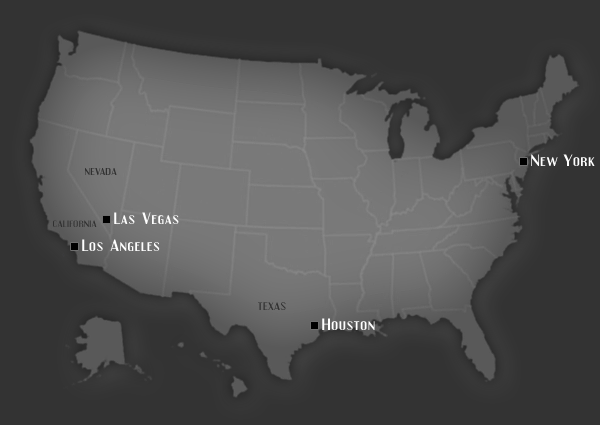
<style>
.page{position:relative;width:600px;height:425px;background:#333333}
.page>*{position:absolute;margin:0}
.t1{font:14.4px "Engebrechtre";letter-spacing:0.05em;color:#ffffff;scale:1.25 1}
.t2{font:8.8px "Engebrechtre";letter-spacing:0.05em;color:#303030;scale:1.25 1}
.t3{font:8px "Engebrechtre";letter-spacing:0.05em;color:#424242;scale:1.25 1}
.t4{font:9.6px "Engebrechtre";letter-spacing:0.05em;color:#303030;scale:1.25 1}
</style>
<div class="page">
<p class="t1" style="left:531px;top:154px;width:64px;height:12px">New York</p>
<p class="t2" style="left:85px;top:168px;width:32px;height:7px">NEVADA</p>
<p class="t3" style="left:53px;top:220px;width:44px;height:7px">CALIFORNIA</p>
<p class="t1" style="left:114px;top:212px;width:65px;height:12px">Las Vegas</p>
<p class="t1" style="left:82px;top:239px;width:78px;height:12px">Los Angeles</p>
<p class="t4" style="left:258px;top:302px;width:28px;height:8px">TEXAS</p>
<p class="t1" style="left:322px;top:318px;width:53px;height:12px">Houston</p>
</div>
